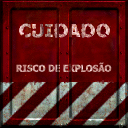
<style>
.page{position:relative;width:128px;height:128px}
.page>*{position:absolute;margin:0}
.t1{font:9.5px "Tahoma-Bold";text-transform:uppercase;scale:0.95 1}
</style>
<div class="page">
<p class="t1" style="left:16px;top:62px;width:96px;height:10px">RISCO DE EXPLOSÃO</p>
</div>
